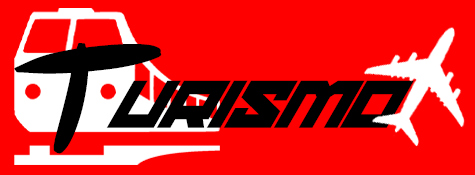
<style>
.page{position:relative;width:475px;height:175px;background:#ff0000}
.page>*{position:absolute;margin:0}
.t1{font:66.7px "xenosphere";color:#000000}
.t2{font:100px "DotZero";color:#000000}
</style>
<div class="page">
<p class="t1" style="left:14px;top:43px;width:400px;height:111px"><span class="t2">T</span>urismo</p>
</div>
